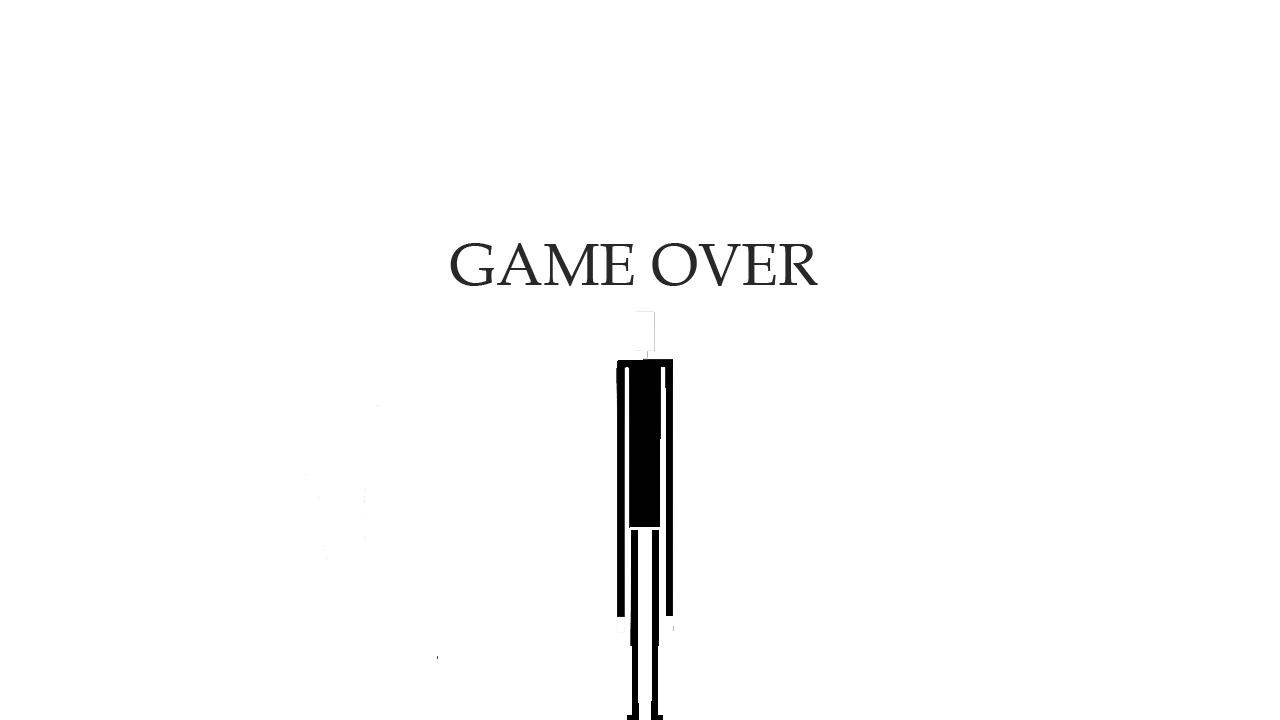
<style>
.page{position:relative;width:1280px;height:720px;background:#ffffff}
.page>*{position:absolute;margin:0}
.t1{font:60px "BookAntiqua";color:#282828}
</style>
<div class="page">
<p class="t1" style="left:450px;top:243px;width:368px;height:43px">GAME OVER</p>
</div>
